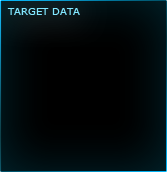
<style>
.page{position:relative;width:167px;height:172px;background:#000000}
.page>*{position:absolute;margin:0}
.t1{font:10px "Verdana";color:#82e7ff}
</style>
<div class="page">
<p class="t1" style="left:7px;top:8px;width:73px;height:7px">TARGET DATA</p>
</div>
